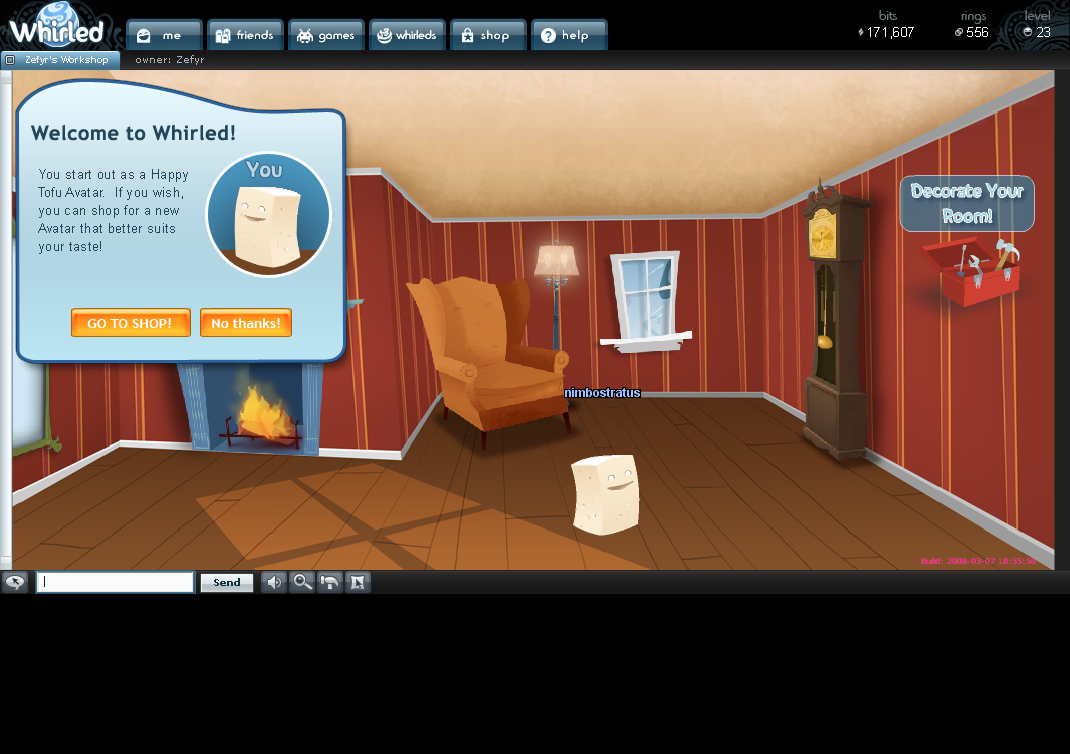
<style>
.page{position:relative;width:1070px;height:754px;background:#000000}
.page>*{position:absolute;margin:0}
.t1{font:14px "BlippoLightSF";letter-spacing:0.015em;color:#6a787c}
.t2{font:22.8px "SunnySide";color:#ffffff}
.t3{font:12px "BlippoLightSF";letter-spacing:0.1em;color:#ffffff;scale:1.07 1}
.t4{font:12px "BlippoLightSF";letter-spacing:0.05em;color:#ffffff;scale:1.07 1}
.t5{font:12px "BlippoLightSF";letter-spacing:0.025em;color:#ffffff;scale:1.07 1}
.t6{font:12px "BlippoLightSF";color:#ffffff;scale:1.07 1}
.t7{font:13px "ArialMT";letter-spacing:0.025em;color:#ffffff}
.t8{font:10px "Arial-BoldMT";color:#ffffff}
.t9{font:20px "TrebuchetMS-Bold";letter-spacing:0.025em;color:#21455b}
.t10{font:18px "SunnySide";letter-spacing:0.025em;color:#bed5e5}
.t11{font:13px/18px "ArialMT";letter-spacing:0.025em;color:#21455b}
.t12{font:13px "TrebuchetMS-Bold";color:#ffffff;scale:1.07 1}
</style>
<div class="page">
<p class="t1" style="left:879px;top:10px;width:172px;height:14px">bits               rings         level</p>
<p class="t2" style="left:9px;top:20px;width:94px;height:22px">Whirled</p>
<p class="t2" style="left:9px;top:20px;width:94px;height:22px">Whirled</p>
<p class="t3" style="left:163px;top:30px;width:425px;height:13px">me               <span class="t4">friends             </span><span class="t5">games            </span><span class="t6">whirleds             </span>shop               help</p>
<p class="t3" style="left:163px;top:30px;width:425px;height:13px">me               <span class="t4">friends             </span><span class="t5">games            </span><span class="t6">whirleds             </span>shop               help</p>
<p class="t7" style="left:868px;top:27px;width:182px;height:12px">171,607            556           23</p>
<p class="t8" style="left:26px;top:56px;width:82px;height:9px">Zefyr’s Workshop</p>
<p class="t9" style="left:31px;top:125px;width:204px;height:16px">Welcome to Whirled!</p>
<p class="t10" style="left:246px;top:161px;width:36px;height:17px">You</p>
<p class="t11" style="left:38px;top:169px;width:150px;height:85px">You start out as a Happy<br>Tofu Avatar.  If you wish, you can shop for a new Avatar that better suits your taste!</p>
<p class="t12" style="left:87px;top:318px;width:84px;height:10px">GO TO SHOP!</p>
<p class="t12" style="left:212px;top:318px;width:68px;height:10px">No thanks!</p>
</div>
